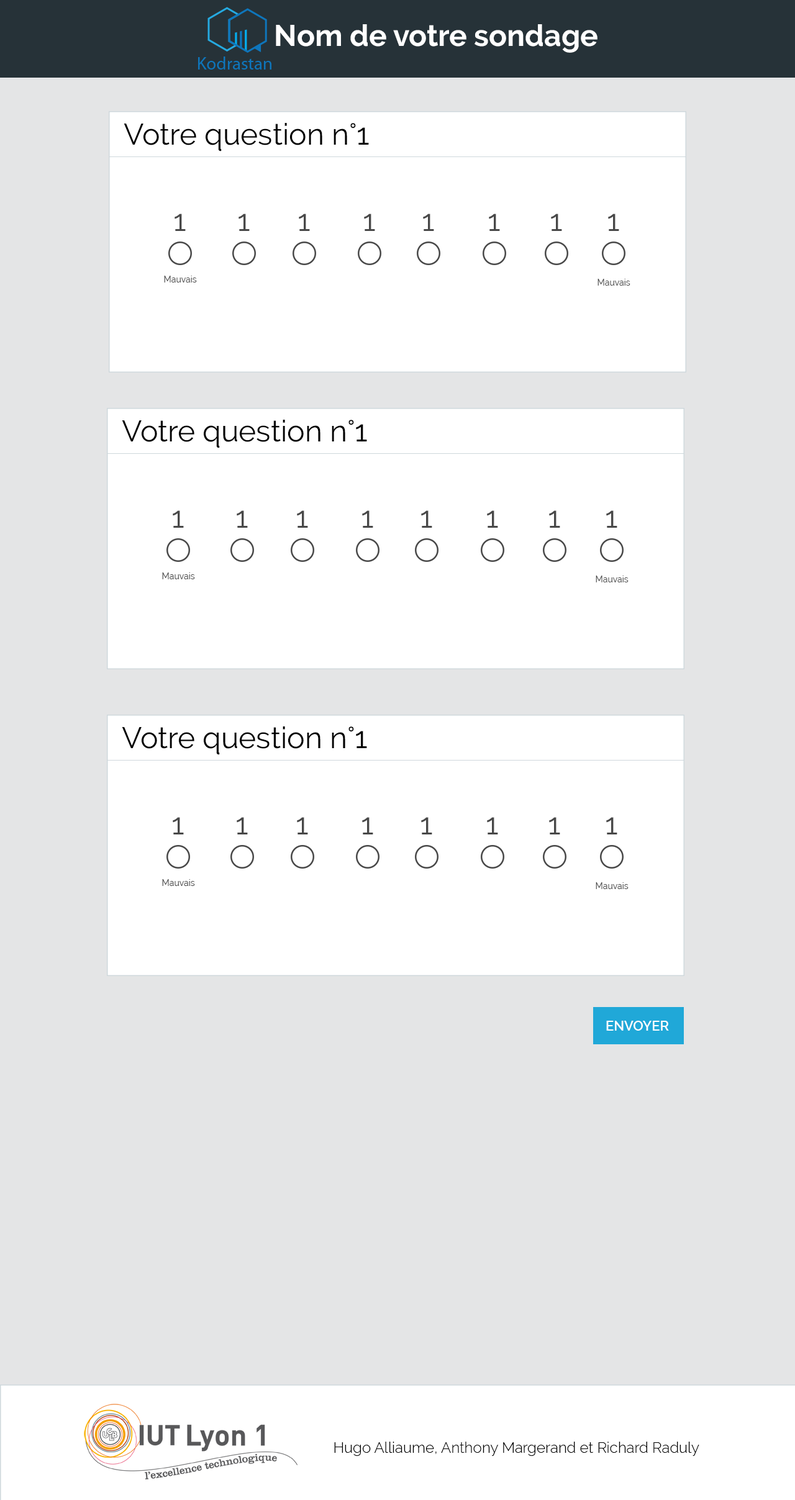
<style>
.page{position:relative;width:795px;height:1500px;background:#e4e5e6}
.page>*{position:absolute;margin:0}
.t1{font:29.8px "Raleway-Bold";color:#ffffff}
.t2{font:29.8px "Raleway-Regular";color:#000000}
.t3{font:29.8px "Raleway-Regular";color:#484848}
.t4{font:8.7px "Raleway-Regular";color:#484848}
.t5{font:13.7px "Raleway-SemiBold";color:#ffffff}
.t6{font:14.9px "Raleway-Light";color:#000000}
</style>
<div class="page">
<p class="t1" style="left:276px;top:24px;width:321px;height:29px">Nom de votre sondage</p>
<p class="t2" style="left:124px;top:123px;width:245px;height:29px">Votre question n°1</p>
<p class="t3" style="left:174px;top:214px;width:12px;height:17px">1</p>
<p class="t3" style="left:238px;top:214px;width:12px;height:17px">1</p>
<p class="t3" style="left:299px;top:214px;width:11px;height:17px">1</p>
<p class="t3" style="left:364px;top:214px;width:11px;height:17px">1</p>
<p class="t3" style="left:423px;top:214px;width:11px;height:17px">1</p>
<p class="t3" style="left:489px;top:214px;width:11px;height:17px">1</p>
<p class="t3" style="left:551px;top:214px;width:11px;height:17px">1</p>
<p class="t3" style="left:608px;top:214px;width:11px;height:17px">1</p>
<p class="t4" style="left:164px;top:276px;width:33px;height:7px">Mauvais</p>
<p class="t4" style="left:597px;top:279px;width:33px;height:7px">Mauvais</p>
<p class="t2" style="left:122px;top:420px;width:245px;height:28px">Votre question n°1</p>
<p class="t3" style="left:173px;top:510px;width:11px;height:18px">1</p>
<p class="t3" style="left:237px;top:510px;width:11px;height:18px">1</p>
<p class="t3" style="left:297px;top:510px;width:11px;height:18px">1</p>
<p class="t3" style="left:362px;top:510px;width:11px;height:18px">1</p>
<p class="t3" style="left:421px;top:510px;width:11px;height:18px">1</p>
<p class="t3" style="left:487px;top:510px;width:11px;height:18px">1</p>
<p class="t3" style="left:549px;top:510px;width:11px;height:18px">1</p>
<p class="t3" style="left:606px;top:510px;width:11px;height:18px">1</p>
<p class="t4" style="left:162px;top:573px;width:33px;height:6px">Mauvais</p>
<p class="t4" style="left:596px;top:576px;width:32px;height:6px">Mauvais</p>
<p class="t2" style="left:122px;top:727px;width:245px;height:28px">Votre question n°1</p>
<p class="t3" style="left:173px;top:817px;width:11px;height:18px">1</p>
<p class="t3" style="left:237px;top:817px;width:11px;height:18px">1</p>
<p class="t3" style="left:297px;top:817px;width:11px;height:18px">1</p>
<p class="t3" style="left:362px;top:817px;width:11px;height:18px">1</p>
<p class="t3" style="left:421px;top:817px;width:11px;height:18px">1</p>
<p class="t3" style="left:487px;top:817px;width:11px;height:18px">1</p>
<p class="t3" style="left:549px;top:817px;width:11px;height:18px">1</p>
<p class="t3" style="left:606px;top:817px;width:11px;height:18px">1</p>
<p class="t4" style="left:162px;top:879px;width:33px;height:7px">Mauvais</p>
<p class="t4" style="left:596px;top:882px;width:32px;height:7px">Mauvais</p>
<p class="t5" style="left:606px;top:1021px;width:63px;height:10px">ENVOYER</p>
<p class="t6" style="left:334px;top:1442px;width:365px;height:14px">Hugo Alliaume, Anthony Margerand et Richard Raduly</p>
</div>
